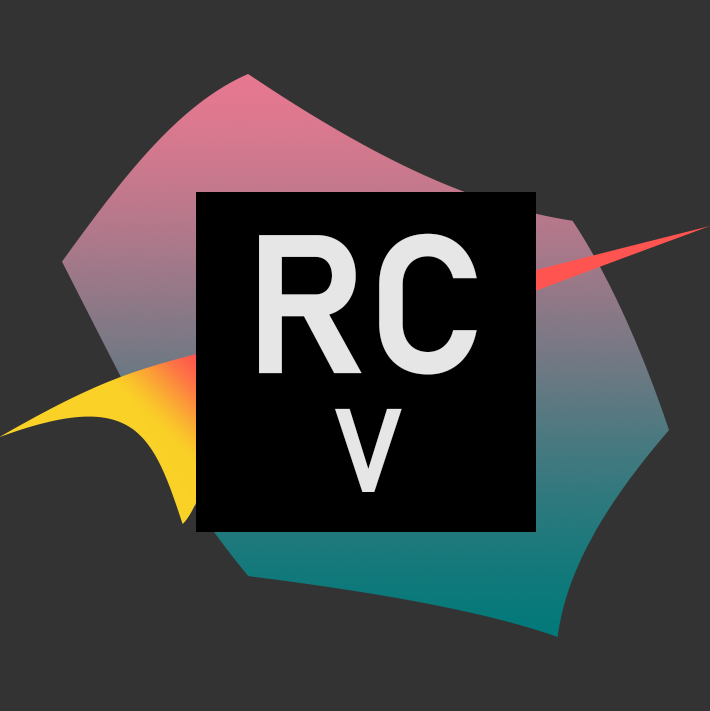
<style>
.page{position:relative;width:710px;height:711px;background:#333333}
.page>*{position:absolute;margin:0}
.t1{font:194.4px "Bahnschrift-SemiBold";color:#e6e6e6}
.t2{font:116.7px "Bahnschrift-SemiBold";color:#e6e6e6}
</style>
<div class="page">
<p class="t1" style="left:259px;top:233px;width:218px;height:142px">RC</p>
<p class="t2" style="left:335px;top:408px;width:67px;height:84px">V</p>
</div>
